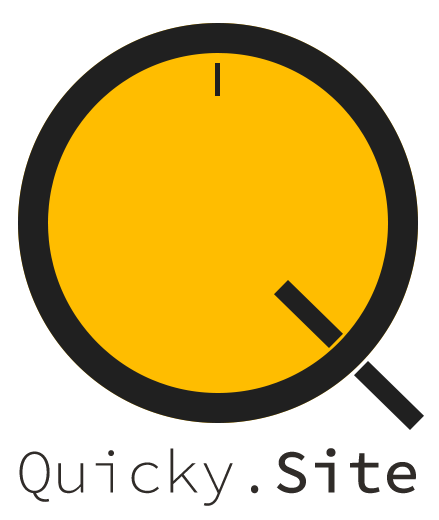
<style>
.page{position:relative;width:439px;height:520px;background:#ffffff}
.page>*{position:absolute;margin:0}
.t1{font:61.1px "SourceCodeRoman-Light";color:#302c29}
.t2{font:61.1px "SourceCodeRoman-Medium";color:#302c29}
</style>
<div class="page">
<p class="t1" style="left:19px;top:448px;width:397px;height:58px">Quicky.<span class="t2">Site</span></p>
</div>
